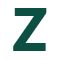
<style>
.page{position:relative;width:60px;height:60px;background:#ffffff}
.page>*{position:absolute;margin:0}
.t1{font:58.4px "Lato-Black";color:#0b5043}
</style>
<div class="page">
<p class="t1" style="left:13px;top:8px;width:34px;height:43px">Z</p>
</div>
